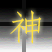
<style>
.page{position:relative;width:52px;height:52px}
.page>*{position:absolute;margin:0}
.t1{font:36px "FangSong";color:#fde03e}
</style>
<div class="page">
<p class="t1" style="left:10px;top:10px;width:32px;height:34px">神</p>
</div>
